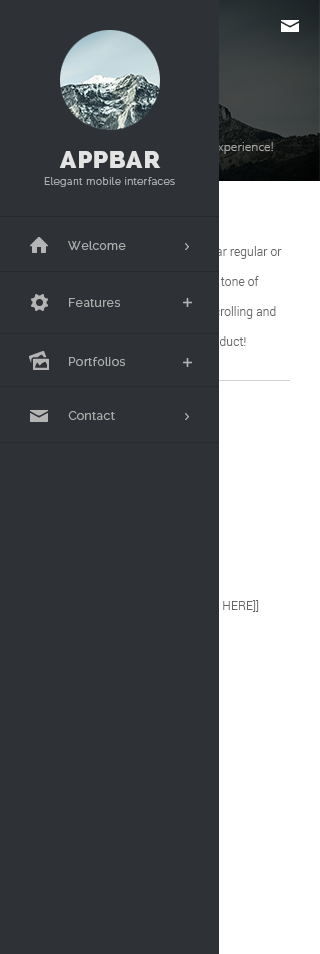
<style>
.page{position:relative;width:320px;height:954px;background:#2e3136}
.page>*{position:absolute;margin:0}
.t1{font:24px "Raleway-Heavy";letter-spacing:0.04em;color:#e3e3e3}
.t2{font:10px "Raleway-Light";letter-spacing:0.06em;color:#acadae}
.t3{font:12px "Raleway-Regular";letter-spacing:0.04em;color:#acacac}
</style>
<div class="page">
<p class="t1" style="left:59px;top:151px;width:102px;height:17px">APPBAR</p>
<p class="t2" style="left:44px;top:177px;width:131px;height:10px">Elegant mobile interfaces</p>
<p class="t3" style="left:68px;top:241px;width:58px;height:9px">Welcome</p>
<p class="t3" style="left:69px;top:298px;width:51px;height:9px">Features</p>
<p class="t3" style="left:69px;top:357px;width:56px;height:9px">Portfolios</p>
<p class="t3" style="left:68px;top:411px;width:47px;height:9px">Contact</p>
</div>
